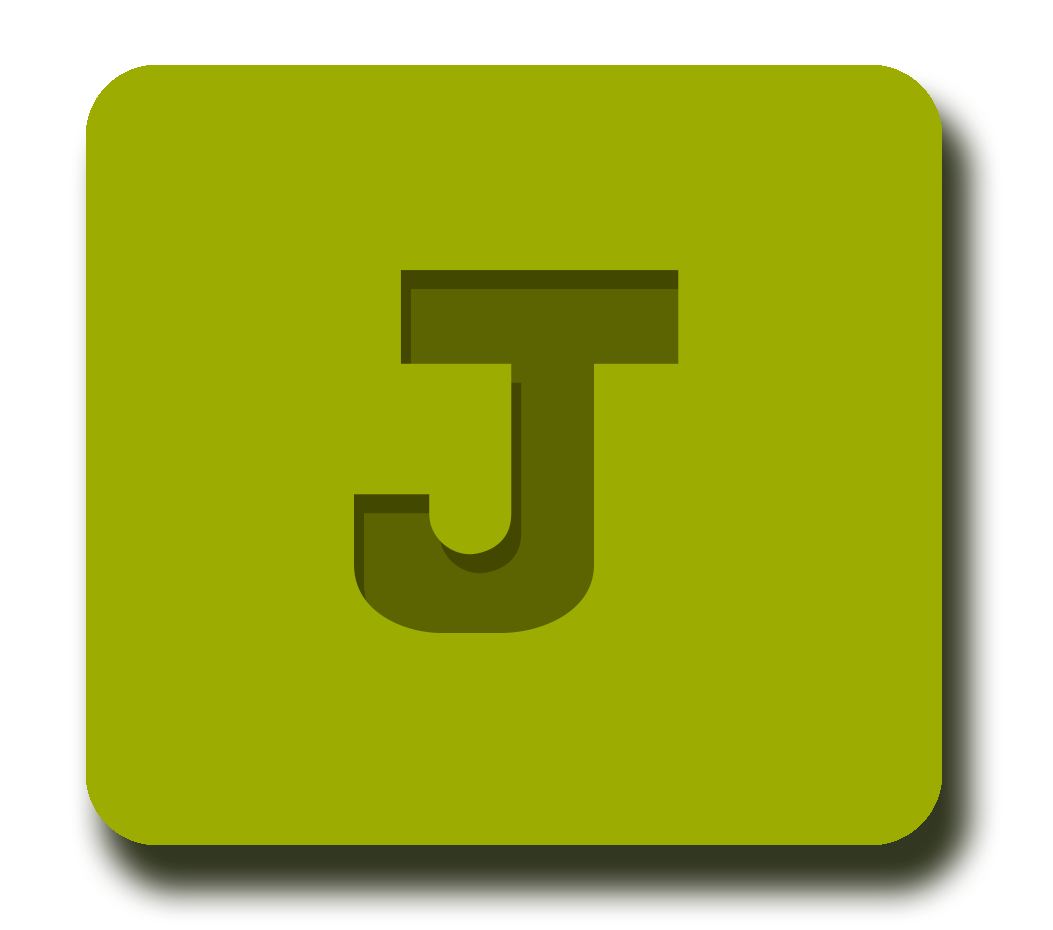
<style>
.page{position:relative;width:1053px;height:930px;background:#9cac00}
.page>*{position:absolute;margin:0}
.t1{font:504.7px "BadTyp-Regular";color:#5b6400}
</style>
<div class="page">
<p class="t1" style="left:354px;top:270px;width:325px;height:363px">J</p>
</div>
